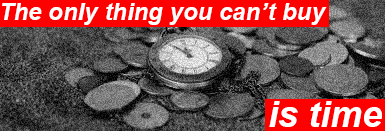
<style>
.page{position:relative;width:385px;height:131px}
.page>*{position:absolute;margin:0}
.t1{font:24px "Arial-BoldItalicMT";color:#ffffff}
.t2{font:36px "Arial-BoldItalicMT";color:#ffffff}
</style>
<div class="page">
<p class="t1" style="left:2px;top:3px;width:325px;height:22px">The only thing you can’t buy</p>
<p class="t2" style="left:269px;top:101px;width:113px;height:26px">is time</p>
</div>
